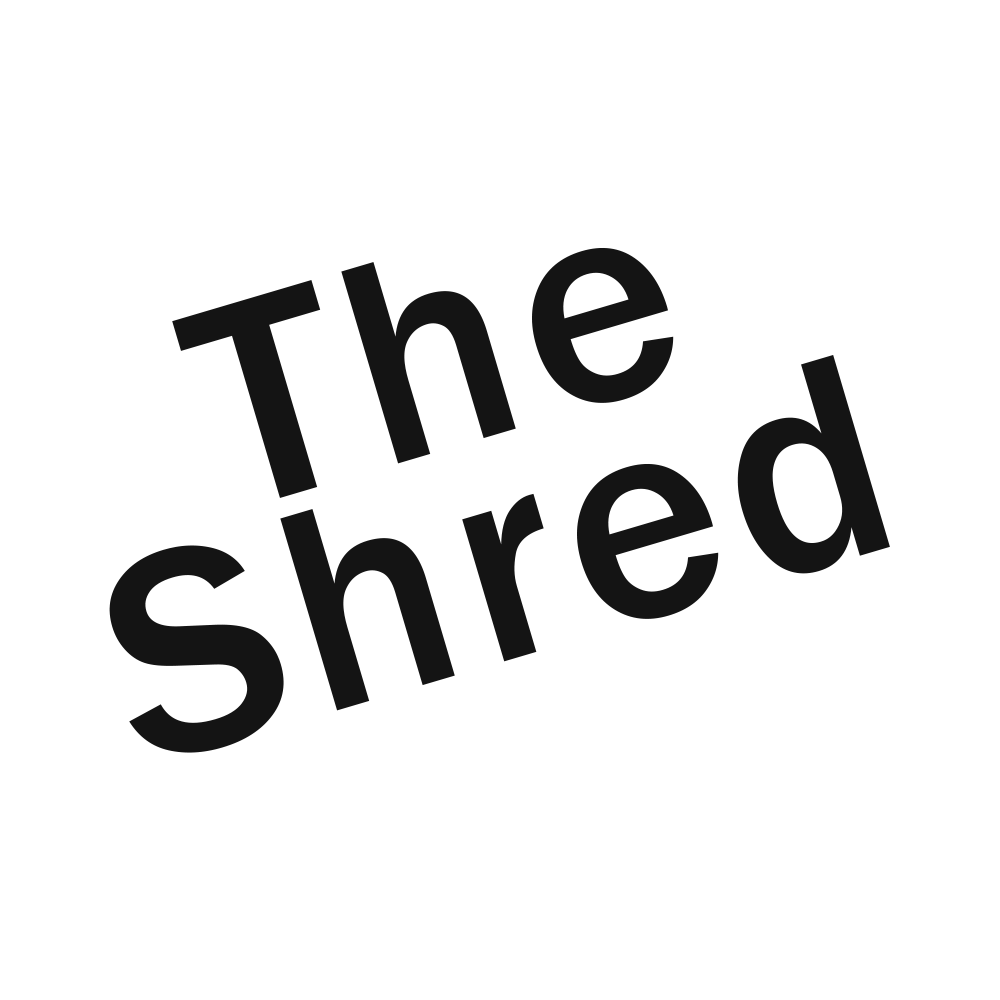
<style>
.page{position:relative;width:1000px;height:1000px;background:#ffffff}
.page>*{position:absolute;margin:0}
.t1{font:300px/44px "FranklinGothic-Medium";letter-spacing:0.04em;color:#141414}
</style>
<div class="page">
<p class="t1" style="left:109px;top:247px;width:781px;height:506px;text-align:center;rotate:-16deg">The<br><br><br><br> <br>Shred</p>
</div>
